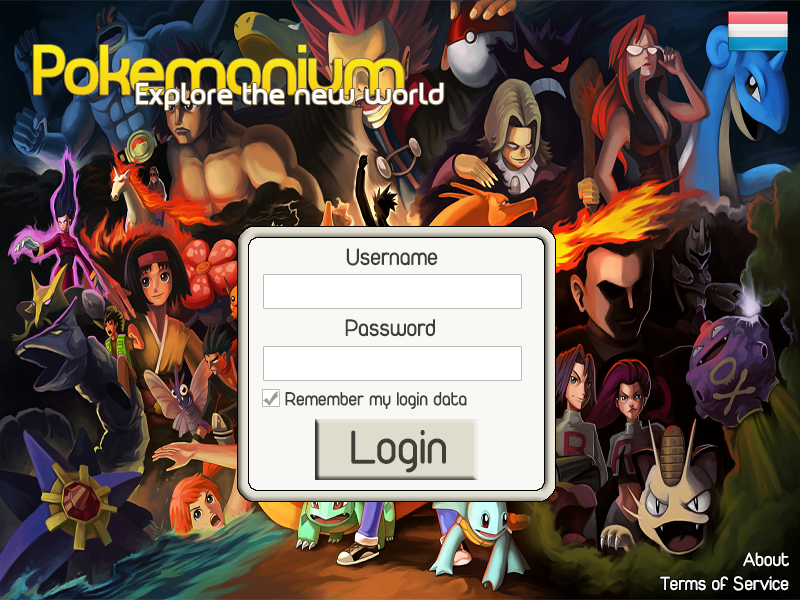
<style>
.page{position:relative;width:800px;height:600px}
.page>*{position:absolute;margin:0}
.t1{font:25px "Duepuntozero";color:#403e36}
.t2{font:20px "Duepuntozero";color:#403e36}
.t3{font:50px "Duepuntozero";color:#403e36}
.t4{font:20px "Duepuntozero";color:#ffffff}
</style>
<div class="page">
<p class="t1" style="left:346px;top:248px;width:92px;height:18px">Username</p>
<p class="t1" style="left:345px;top:319px;width:90px;height:18px">Password</p>
<p class="t2" style="left:285px;top:391px;width:182px;height:18px">Remember my login data</p>
<p class="t3" style="left:351px;top:429px;width:95px;height:44px">Login</p>
<p class="t4" style="left:743px;top:552px;width:46px;height:15px">About</p>
<p class="t4" style="left:660px;top:576px;width:129px;height:15px">Terms of Service</p>
</div>
